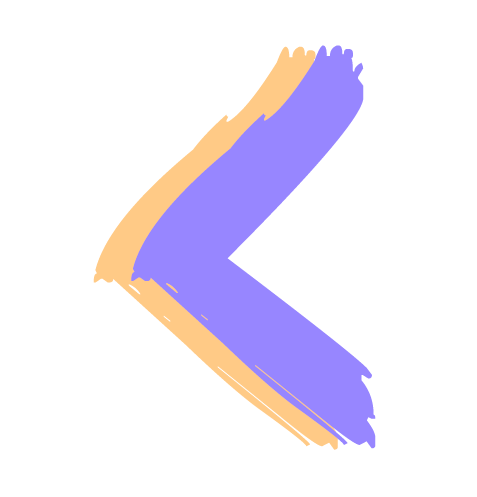
<style>
.page{position:relative;width:477px;height:497px;background:#ffffff}
.page>*{position:absolute;margin:0}
.t1{font:500px "SugarDeath2";color:#9786ff}
</style>
<div class="page">
<p class="t1" style="left:131px;top:45px;width:245px;height:404px">&lt;</p>
</div>
